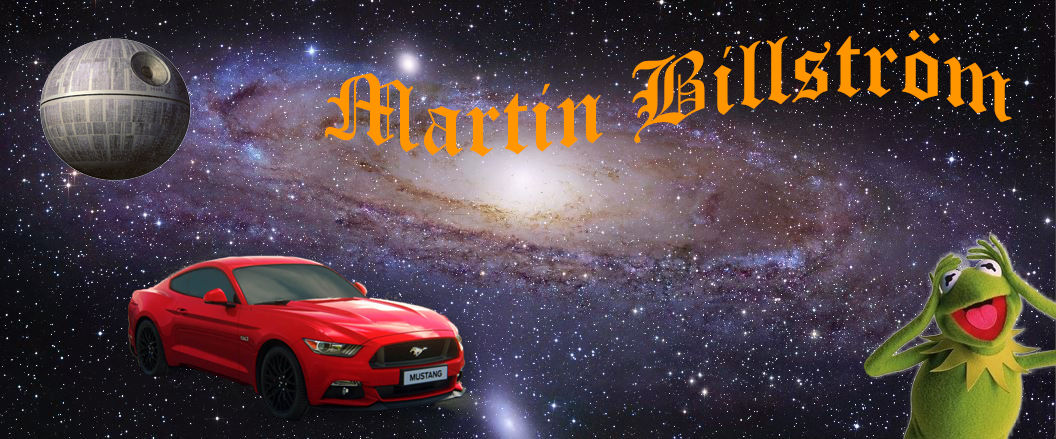
<style>
.page{position:relative;width:1056px;height:439px}
.page>*{position:absolute;margin:0}
.t1{font:96px "OldEnglishTextMT";color:#ff9600}
</style>
<div class="page">
<p class="t1" style="left:325px;top:29px;width:687px;height:128px">Martin Billström</p>
</div>
